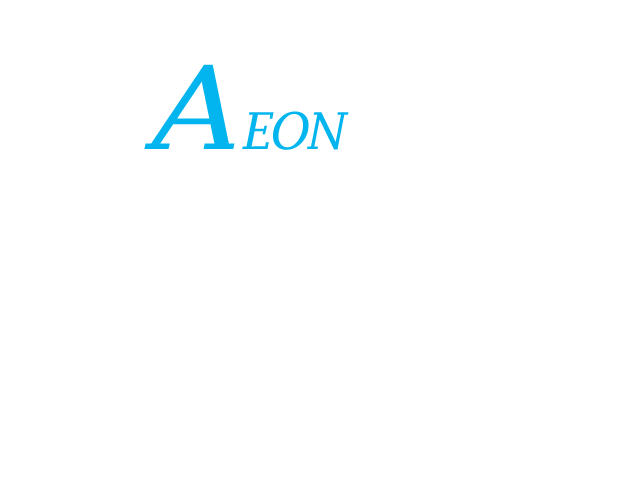
<style>
.page{position:relative;width:640px;height:480px;background:#ffffff}
.page>*{position:absolute;margin:0}
.t1{font:114.8px "LucidaFax-Italic";letter-spacing:-0.05em;color:#02b5ee;scale:1.17 1}
.t2{font:50.8px "LucidaFax-Italic";letter-spacing:-0.05em;color:#02b5ee}
</style>
<div class="page">
<p class="t1" style="left:144px;top:64px;width:91px;height:85px">A</p>
<p class="t2" style="left:242px;top:111px;width:107px;height:39px">EON</p>
</div>
